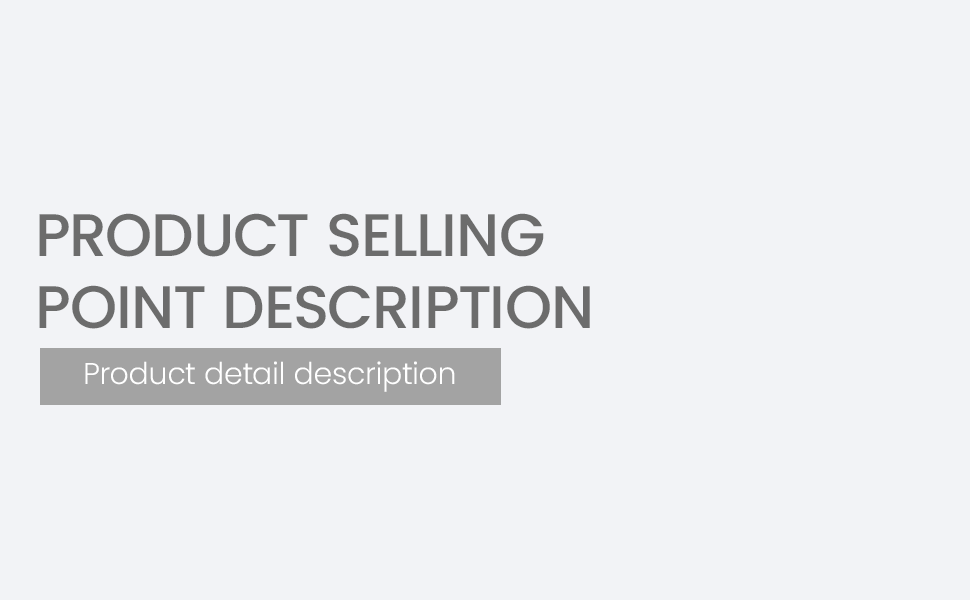
<style>
.page{position:relative;width:970px;height:600px;background:#f2f3f6}
.page>*{position:absolute;margin:0}
.t1{font:60px "Poppins-Medium";color:#6c6c6c;text-transform:uppercase}
.t2{font:30px "Poppins-Light";color:#ffffff}
</style>
<div class="page">
<p class="t1" style="left:39px;top:213px;width:551px;height:116px">Product selling<br>point description</p>
<p class="t2" style="left:85px;top:361px;width:370px;height:31px">Product detail description</p>
</div>
